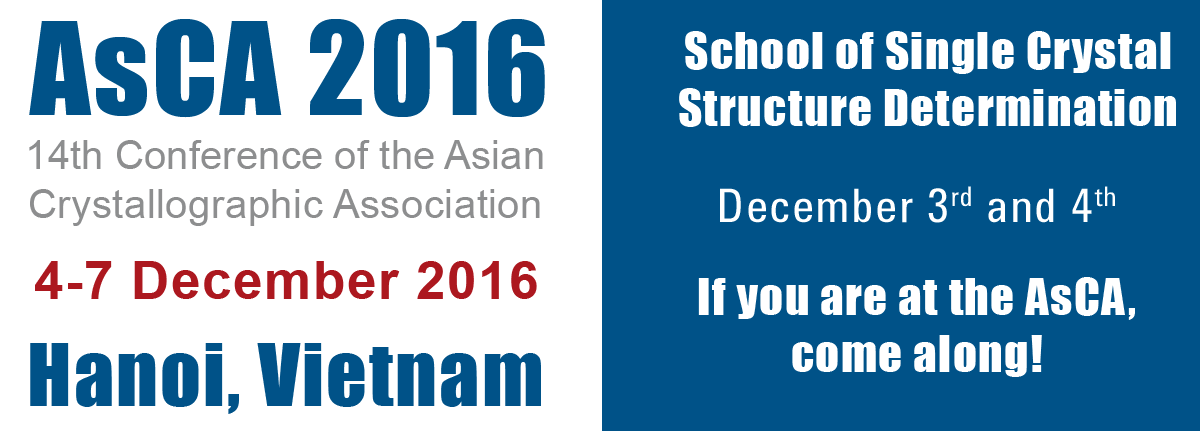
<style>
.page{position:relative;width:1200px;height:431px;background:#005288}
.page>*{position:absolute;margin:0}
.t1{font:118.6px "Impact";letter-spacing:0.025em;color:#005288}
.t2{font:47.4px "Impact";letter-spacing:0.025em;color:#ffffff}
.t3{font:40.3px "ArialMT";color:#8d8e8f}
.t4{font:40.3px "ArialMT";letter-spacing:0.01em;color:#8d8e8f}
.t5{font:47.4px "AgilentCondTT-Regular";letter-spacing:0.025em;color:#ffffff}
.t6{font:53.4px "Arial-BoldMT";letter-spacing:0.025em;color:#ac181f}
.t7{font:80px "Impact";letter-spacing:0.025em;color:#005288}
</style>
<div class="page">
<p class="t1" style="left:29px;top:19px;width:516px;height:99px">AsCA 2016</p>
<p class="t2" style="left:679px;top:31px;width:497px;height:96px;text-align:center">School of Single Crystal<br>Structure Determination</p>
<p class="t3" style="left:29px;top:140px;width:514px;height:86px;text-align:center">14th Conference of the Asian<br><span class="t4">Crystallographic Association</span></p>
<p class="t5" style="left:720px;top:186px;width:395px;height:37px">December 3rd and 4th</p>
<p class="t6" style="left:35px;top:261px;width:502px;height:38px">4-7 December 2016</p>
<p class="t2" style="left:698px;top:277px;width:437px;height:100px;text-align:center">If you are at the AsCA,<br>come along!</p>
<p class="t7" style="left:30px;top:343px;width:511px;height:71px">Hanoi, Vietnam</p>
</div>
